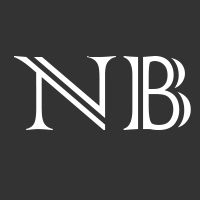
<style>
.page{position:relative;width:200px;height:200px;background:#333333}
.page>*{position:absolute;margin:0}
.t1{font:140px "ColonnaMT";color:#ffffff}
</style>
<div class="page">
<p class="t1" style="left:14px;top:56px;width:177px;height:74px">NB</p>
</div>
